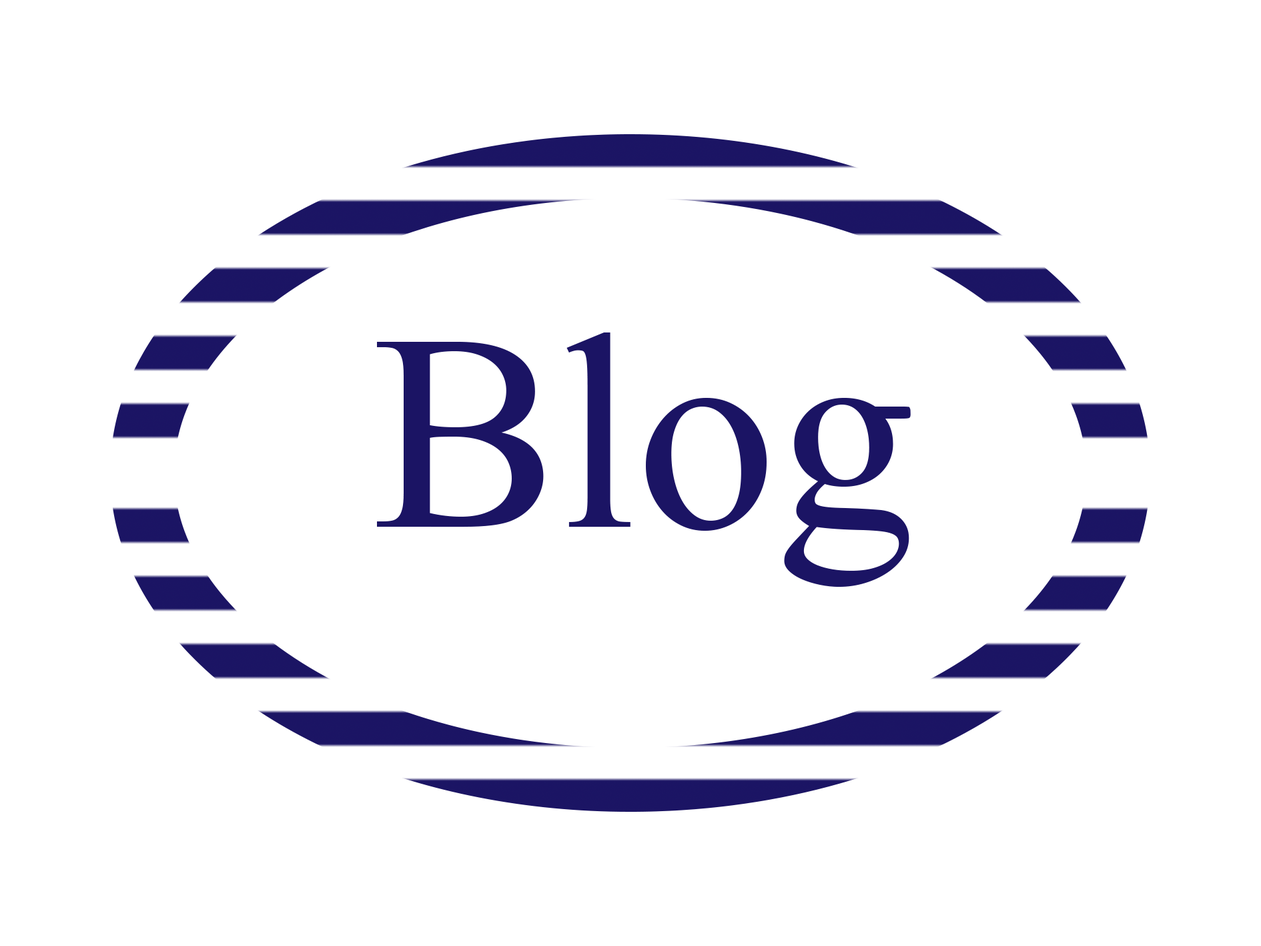
<style>
.page{position:relative;width:1261px;height:946px;background:#ffffff}
.page>*{position:absolute;margin:0}
.t1{font:417px "Microsoft-Himalaya";color:#1b1464}
</style>
<div class="page">
<p class="t1" style="left:377px;top:332px;width:534px;height:255px">Blog</p>
</div>
